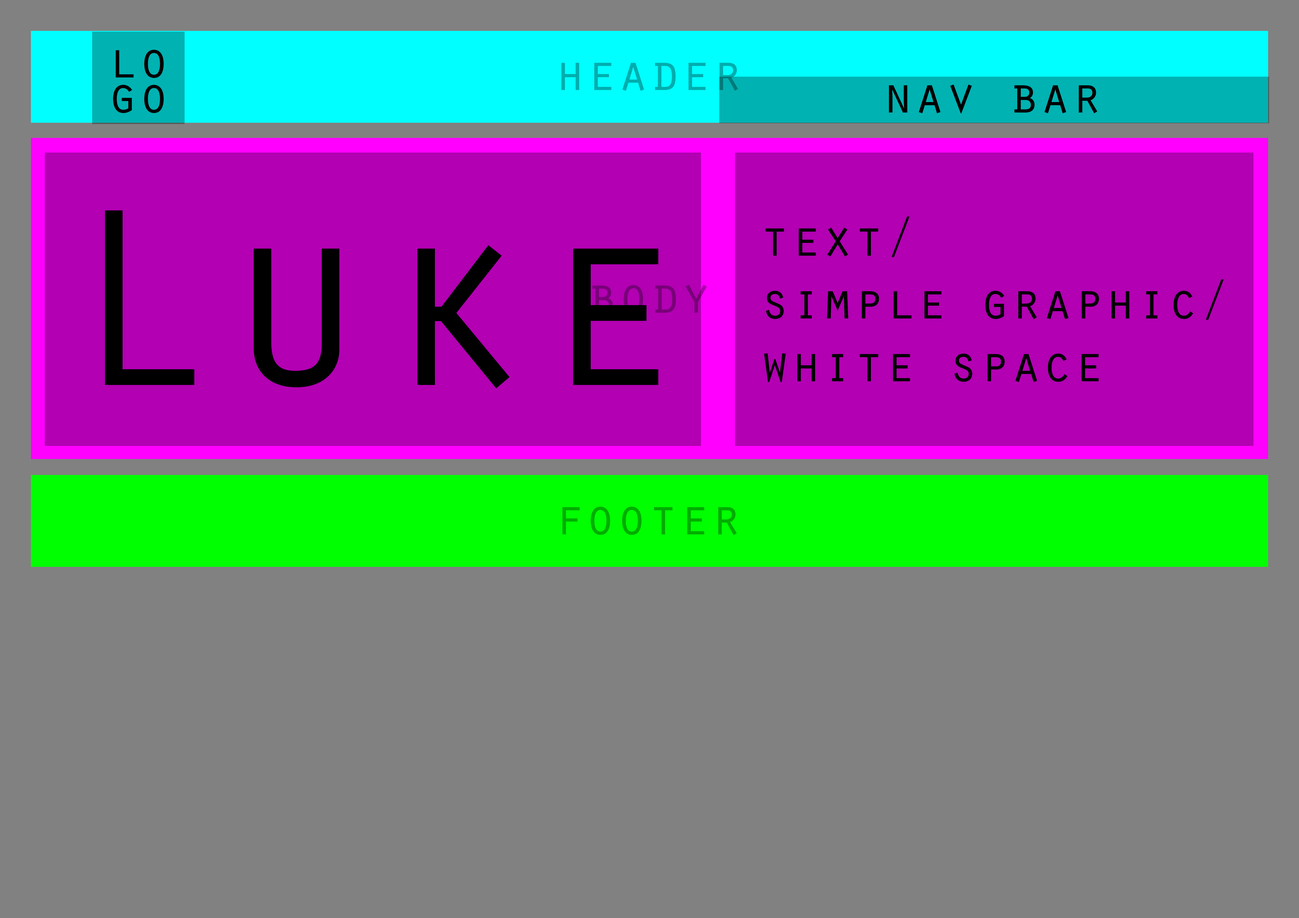
<style>
.page{position:relative;width:1299px;height:918px;background:#818181}
.page>*{position:absolute;margin:0}
.t1{font:52.4px/34.9px "OratorStd";color:#000000}
.t2{font:52.4px "OratorStd";color:#00adad}
.t3{font:52.4px "OratorStd";color:#000000}
.t4{font:261.8px "OratorStd";color:#000000}
.t5{font:52.4px "OratorStd";color:#790079}
.t6{font:52.4px "OratorStd";color:#00ad00}
</style>
<div class="page">
<p class="t1" style="left:113px;top:50px;width:51px;height:63px">lo<br>go</p>
<p class="t2" style="left:561px;top:63px;width:177px;height:28px">header</p>
<p class="t3" style="left:889px;top:85px;width:208px;height:28px">nav bar</p>
<p class="t4" style="left:105px;top:210px;width:553px;height:178px">Luke</p>
<p class="t3" style="left:764px;top:216px;width:459px;height:166px">text/ <br>simple graphic/<br>white space</p>
<p class="t5" style="left:592px;top:285px;width:115px;height:28px">body</p>
<p class="t6" style="left:562px;top:507px;width:175px;height:28px">footer</p>
</div>
